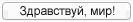
<style>
.page{position:relative;width:133px;height:22px;background:#fbfbfb}
.page>*{position:absolute;margin:0}
.t1{font:12px "ArialMT";color:#181818}
</style>
<div class="page">
<p class="t1" style="left:20px;top:6px;width:95px;height:12px">Здравствуй, мир!</p>
</div>
